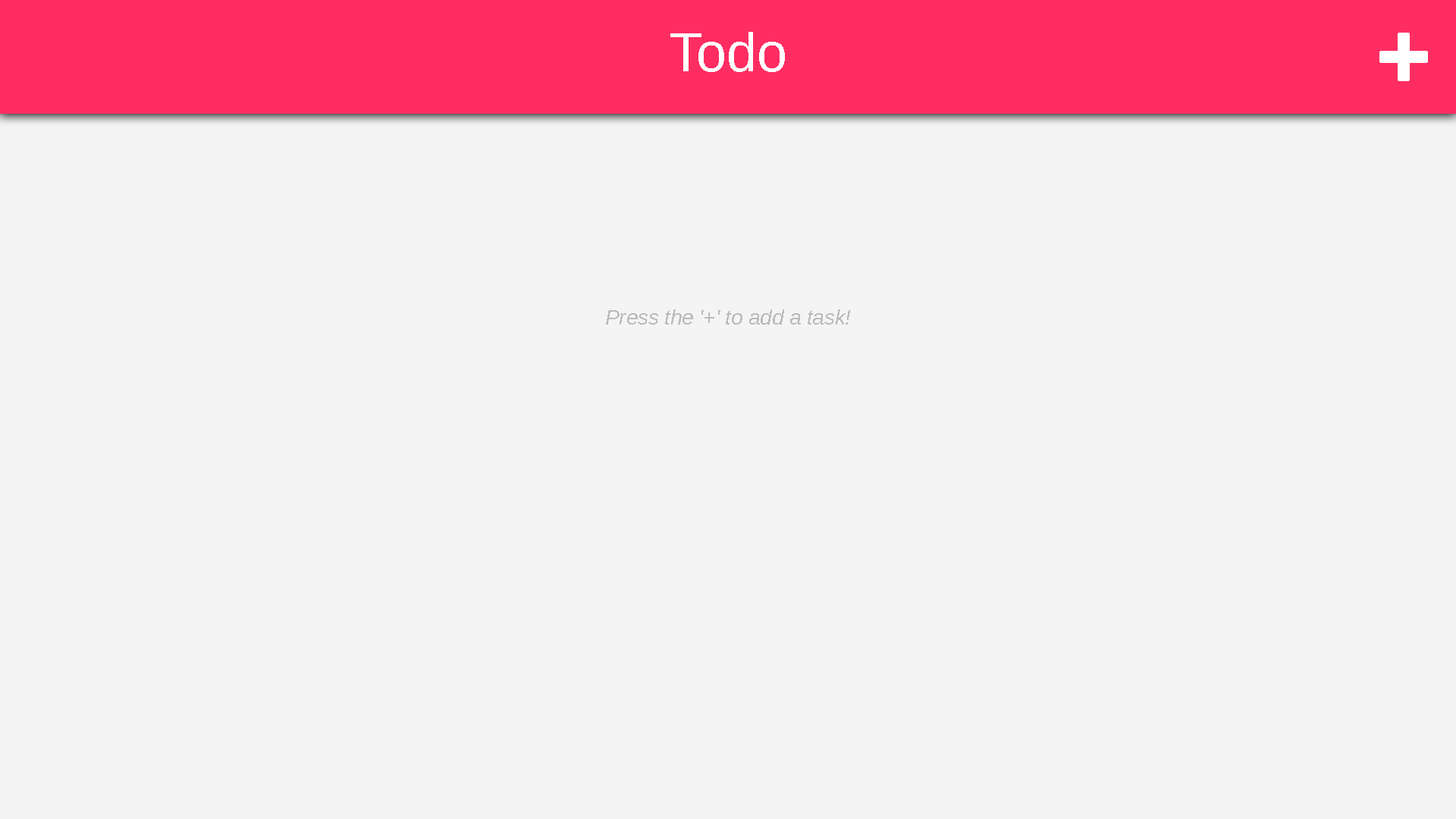
<style>
.page{position:relative;width:1456px;height:819px;background:#f4f4f4}
.page>*{position:absolute;margin:0}
.t1{font:54.6px "Arimo";color:#ffffff}
.t2{font:20.9px "Arimo-Italic";color:#bbbbbb}
</style>
<div class="page">
<p class="t1" style="left:670px;top:32px;width:115px;height:40px">Todo</p>
<p class="t2" style="left:606px;top:309px;width:244px;height:16px">Press the '+' to add a task!</p>
</div>
